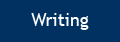
<style>
.page{position:relative;width:120px;height:42px;background:#003160}
.page>*{position:absolute;margin:0}
.t1{font:18px "TrebuchetMS";color:#ffffff}
</style>
<div class="page">
<p class="t1" style="left:31px;top:13px;width:58px;height:17px">Writing</p>
</div>
